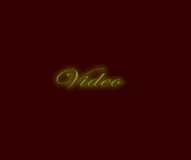
<style>
.page{position:relative;width:191px;height:160px;background:#330000}
.page>*{position:absolute;margin:0}
.t1{font:25.2px "EdwardianScriptITC";letter-spacing:0.025em;color:#81812d;scale:1.43 1}
</style>
<div class="page">
<p class="t1" style="left:56px;top:68px;width:67px;height:20px">Video</p>
</div>
